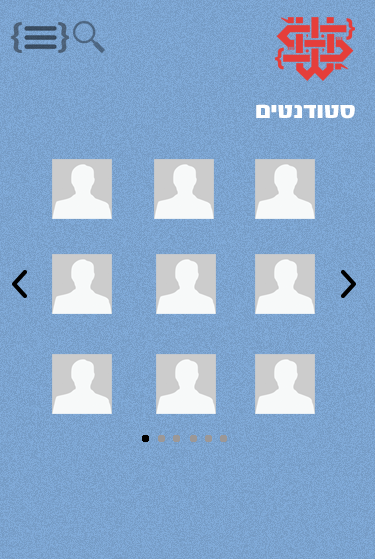
<style>
.page{position:relative;width:375px;height:559px}
.page>*{position:absolute;margin:0}
.t1{font:25px "FbScorpion-Black";color:#ffffff}
</style>
<div class="page">
<p class="t1" style="left:256px;top:104px;width:99px;height:15px">םיטנדוטס</p>
</div>
